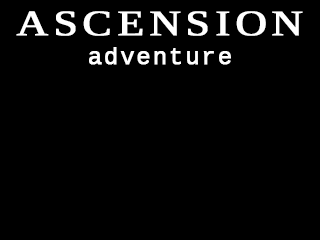
<style>
.page{position:relative;width:320px;height:240px;background:#000000}
.page>*{position:absolute;margin:0}
.t1{font:36px "LiberationSerif";letter-spacing:0.1em;color:#ffffff;font-weight:bold;scale:1.2 1}
.t2{font:24px "LiberationMono";letter-spacing:0.05em;color:#ffffff;font-weight:bold}
</style>
<div class="page">
<p class="t1" style="left:16px;top:11px;width:287px;height:54px;text-align:center">ASCENSION<br><span class="t2">adventure</span></p>
</div>
